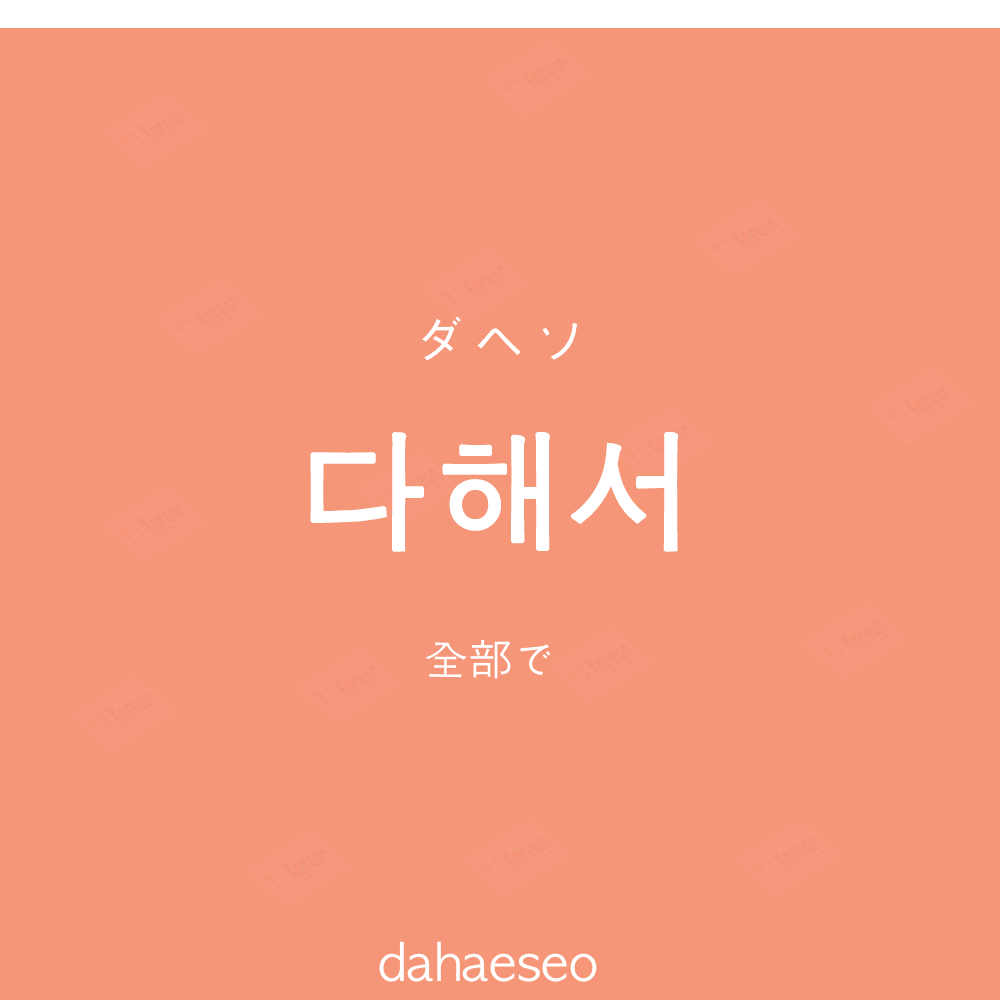
<style>
.page{position:relative;width:1000px;height:1000px;background:#f69679}
.page>*{position:absolute;margin:0}
.t1{font:60px "AppleGothic";color:#ffffff}
.t2{font:130px "AppleGothic";color:#ffffff;font-weight:bold}
.t3{font:45px "AppleGothic";color:#ffffff}
.t4{font:50px "AppleGothic";color:#ffffff}
</style>
<div class="page">
<p class="t1" style="left:422px;top:316px;width:156px;height:45px">ダヘソ</p>
<p class="t2" style="left:310px;top:432px;width:369px;height:120px">다해서</p>
<p class="t3" style="left:425px;top:639px;width:126px;height:40px">全部で</p>
<p class="t4" style="left:379px;top:941px;width:218px;height:41px">dahaeseo</p>
</div>
